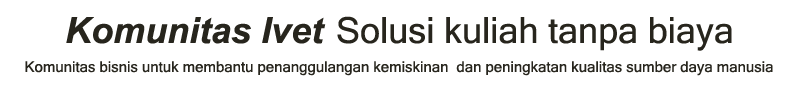
<style>
.page{position:relative;width:800px;height:90px;background:#ffffff}
.page>*{position:absolute;margin:0}
.t1{font:36px "Arial-BoldItalicMT";color:#27251d}
.t2{font:36px "MicrosoftSansSerif";color:#27251d}
.t3{font:15px "MicrosoftSansSerif";color:#27251d}
</style>
<div class="page">
<p class="t1" style="left:66px;top:17px;width:260px;height:27px">Komunitas Ivet</p>
<p class="t2" style="left:337px;top:16px;width:395px;height:35px">Solusi kuliah tanpa biaya</p>
<p class="t3" style="left:25px;top:61px;width:748px;height:15px">Komunitas bisnis untuk membantu penanggulangan kemiskinan  dan peningkatan kualitas sumber daya manusia</p>
</div>
